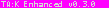
<style>
.page{position:relative;width:109px;height:8px;background:#ff00ff}
.page>*{position:absolute;margin:0}
.t1{font:9px "Consolas";color:#d8d8d8}
.t2{font:9px "Consolas";letter-spacing:-0.1em;color:#d8d8d8}
.t3{font:9px "Consolas";letter-spacing:-0.05em;color:#d8d8d8}
</style>
<div class="page">
<p class="t1" style="left:1px;top:1px;width:94px;height:6px">T<span class="t2">A:K</span> Enhanced <span class="t3">v0.3.0</span></p>
</div>
